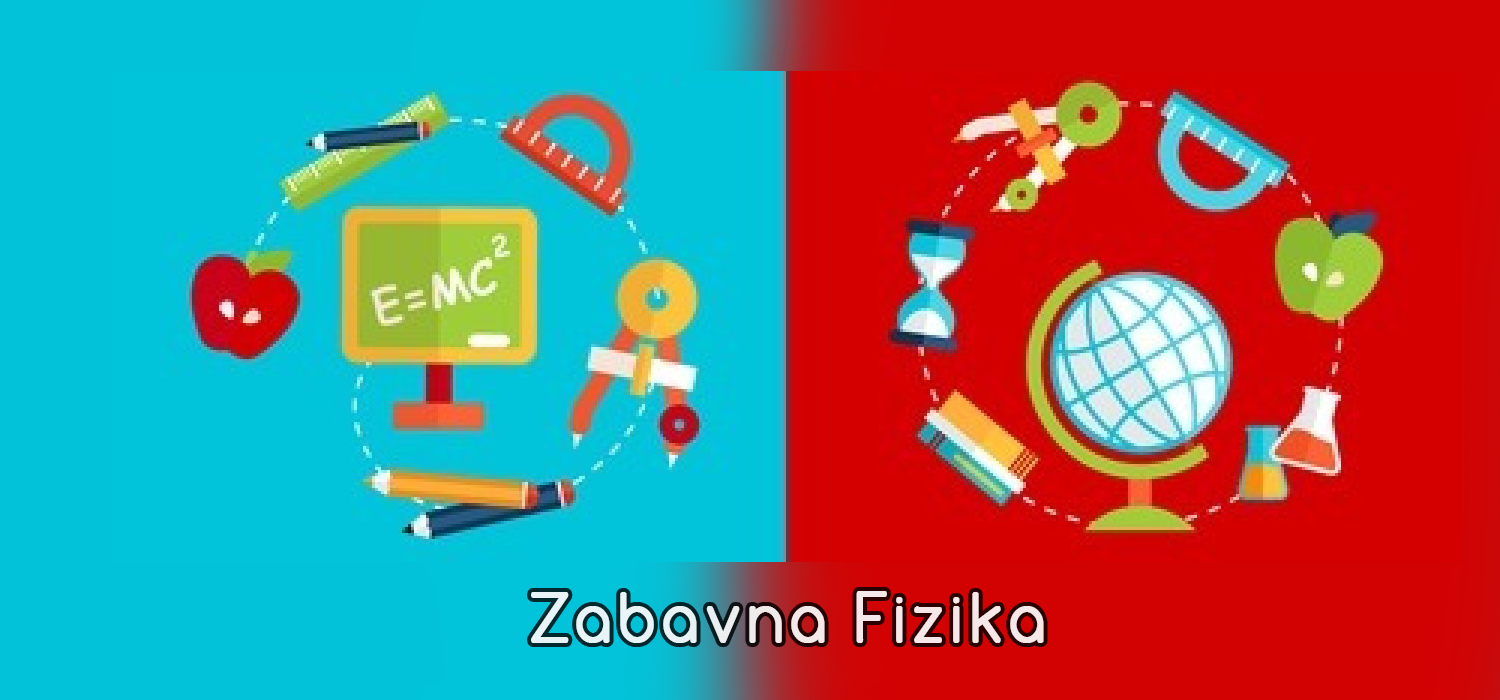
<style>
.page{position:relative;width:1500px;height:700px}
.page>*{position:absolute;margin:0}
.t1{font:72px "Comfortaa";letter-spacing:0.07em;color:#fafafa;font-weight:bold;scale:0.88 1}
</style>
<div class="page">
<p class="t1" style="left:531px;top:591px;width:513px;height:52px;opacity:0.89">Zabavna Fizika</p>
</div>
